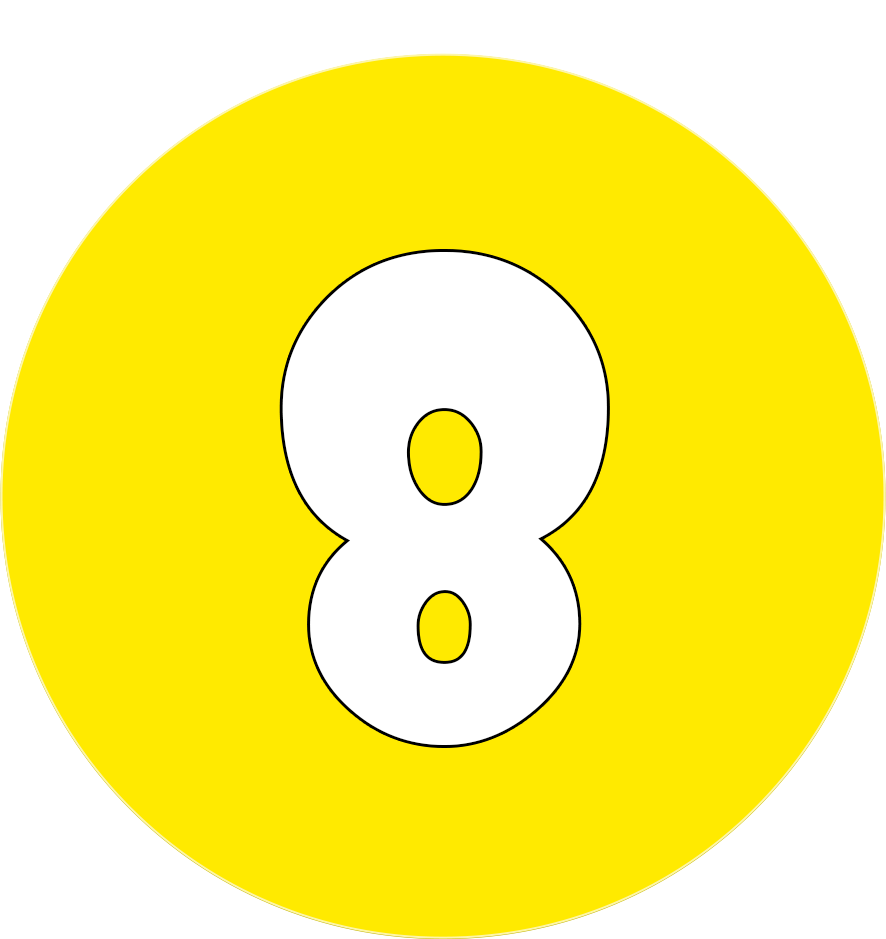
<style>
.page{position:relative;width:886px;height:939px;background:#ffea00}
.page>*{position:absolute;margin:0}
.t1{font:637.2px "ShowcardGothic-Reg";color:#ffffff}
</style>
<div class="page">
<p class="t1" style="left:282px;top:252px;width:325px;height:493px">8</p>
</div>
